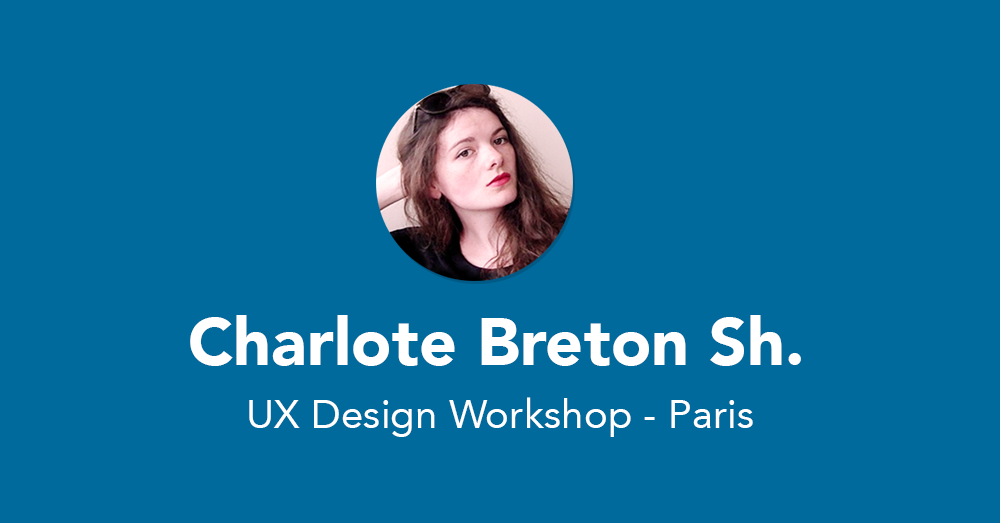
<style>
.page{position:relative;width:1000px;height:523px;background:#006a9c}
.page>*{position:absolute;margin:0}
.t1{font:66.4px "Avenir-Black";color:#ffffff}
.t2{font:40.4px "Avenir-Roman";color:#ffffff}
</style>
<div class="page">
<p class="t1" style="left:190px;top:315px;width:611px;height:51px">Charlote Breton Sh.</p>
<p class="t2" style="left:249px;top:397px;width:504px;height:40px">UX Design Workshop - Paris</p>
</div>
